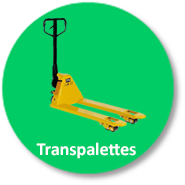
<style>
.page{position:relative;width:185px;height:185px;background:#00cc66}
.page>*{position:absolute;margin:0}
.t1{font:18px "Calibri-Bold";color:#ffffff}
</style>
<div class="page">
<p class="t1" style="left:36px;top:142px;width:100px;height:17px">Transpalettes</p>
</div>
